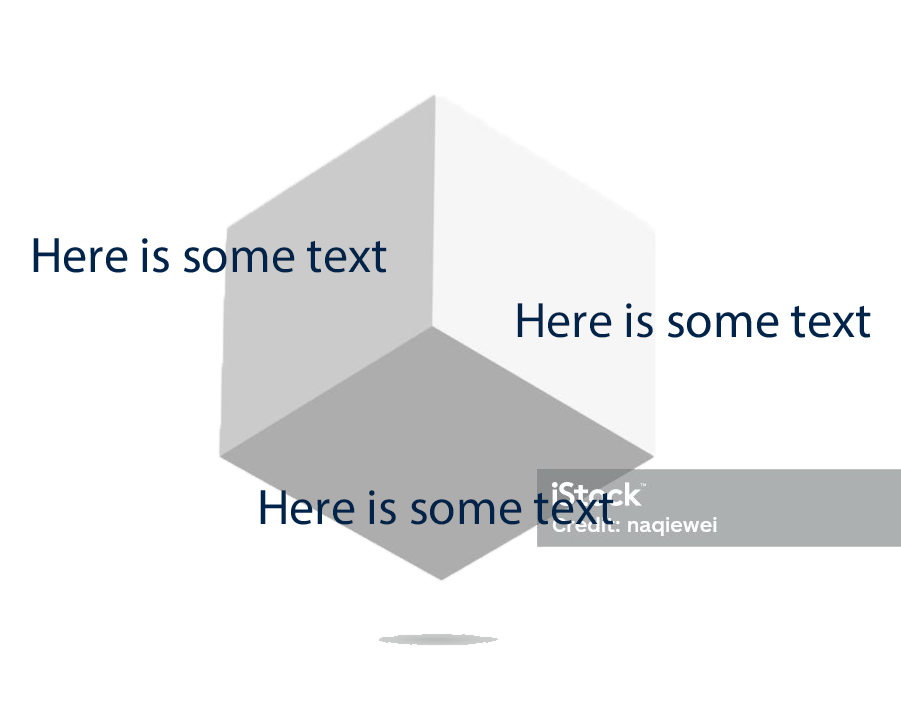
<style>
.page{position:relative;width:901px;height:720px;background:#ffffff}
.page>*{position:absolute;margin:0}
.t1{font:50px "MyriadConceptRoman-Regular";color:#002349}
</style>
<div class="page">
<p class="t1" style="left:33px;top:238px;width:354px;height:35px">Here is some text</p>
<p class="t1" style="left:517px;top:303px;width:354px;height:35px">Here is some text</p>
<p class="t1" style="left:260px;top:490px;width:354px;height:35px">Here is some text</p>
</div>
